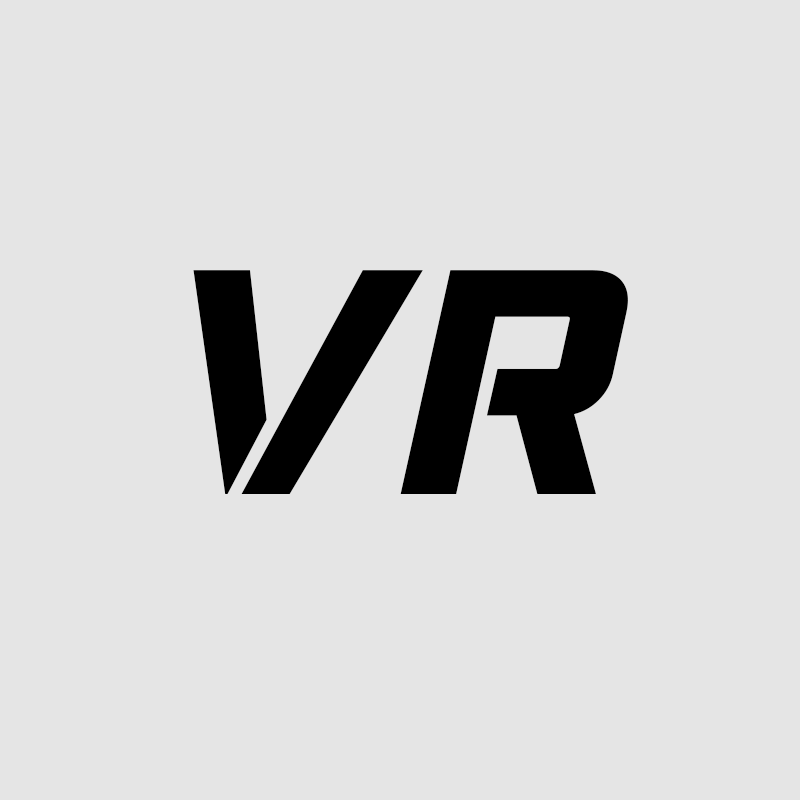
<style>
.page{position:relative;width:800px;height:800px;background:#e5e5e5}
.page>*{position:absolute;margin:0}
.t1{font:335.9px "NikeCombatStencil";color:#000000}
</style>
<div class="page">
<p class="t1" style="left:193px;top:270px;width:435px;height:224px">VR</p>
</div>
